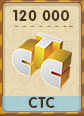
<style>
.page{position:relative;width:84px;height:116px;background:#eadab4}
.page>*{position:absolute;margin:0}
.t1{font:15px "RotondaC-Bold";letter-spacing:0.04em;color:#43341d;text-transform:uppercase}
</style>
<div class="page">
<p class="t1" style="left:13px;top:10px;width:56px;height:11px">120 000</p>
<p class="t1" style="left:28px;top:97px;width:27px;height:11px">СТС</p>
</div>
